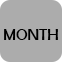
<style>
.page{position:relative;width:62px;height:62px;background:#acacac}
.page>*{position:absolute;margin:0}
.t1{font:16px "BerlinSansFB-Reg";color:#000000}
</style>
<div class="page">
<p class="t1" style="left:4px;top:29px;width:54px;height:11px">MONTH</p>
</div>
